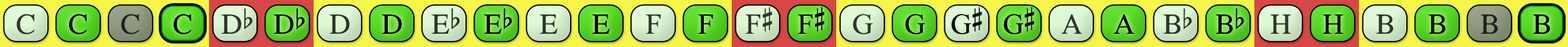
<style>
.page{position:relative;width:1568px;height:47px}
.page>*{position:absolute;margin:0}
.t1{font:29.2px "OpusChords";color:#30362e}
.t2{font:29.2px "OpusChords";color:#000000}
.t3{font:29.2px "OpusChords";color:#1f211b}
.t4{font:29.2px "OpusChords";color:#2f352d}
.t5{font:29.2px "OpusChords";color:#30352d}
.t6{font:29.2px "OpusChords";letter-spacing:-0.025em;color:#000000}
</style>
<div class="page">
<p class="t1" style="left:16px;top:14px;width:19px;height:21px">C</p>
<p class="t2" style="left:69px;top:14px;width:18px;height:21px">C</p>
<p class="t3" style="left:121px;top:14px;width:18px;height:21px">C</p>
<p class="t2" style="left:173px;top:14px;width:18px;height:21px">C</p>
<p class="t4" style="left:221px;top:9px;width:32px;height:25px">Db</p>
<p class="t2" style="left:273px;top:9px;width:32px;height:25px">Db</p>
<p class="t4" style="left:329px;top:15px;width:20px;height:19px">D</p>
<p class="t2" style="left:382px;top:15px;width:20px;height:19px">D</p>
<p class="t5" style="left:432px;top:9px;width:28px;height:25px">Eb</p>
<p class="t2" style="left:484px;top:9px;width:28px;height:25px">Eb</p>
<p class="t1" style="left:540px;top:15px;width:17px;height:19px">E</p>
<p class="t2" style="left:592px;top:15px;width:18px;height:19px">E</p>
<p class="t1" style="left:645px;top:15px;width:16px;height:19px">F</p>
<p class="t2" style="left:698px;top:15px;width:15px;height:19px">F</p>
<p class="t5" style="left:745px;top:7px;width:27px;height:27px">F#</p>
<p class="t2" style="left:797px;top:7px;width:28px;height:27px">F#</p>
<p class="t4" style="left:853px;top:14px;width:20px;height:21px">G</p>
<p class="t2" style="left:905px;top:14px;width:20px;height:21px">G</p>
<p class="t6" style="left:951px;top:7px;width:31px;height:28px">G#</p>
<p class="t6" style="left:1003px;top:7px;width:31px;height:28px">G#</p>
<p class="t4" style="left:1061px;top:14px;width:21px;height:20px">A</p>
<p class="t2" style="left:1113px;top:14px;width:21px;height:20px">A</p>
<p class="t5" style="left:1163px;top:9px;width:29px;height:25px">Bb</p>
<p class="t2" style="left:1216px;top:9px;width:28px;height:25px">Bb</p>
<p class="t5" style="left:1270px;top:15px;width:21px;height:19px">H</p>
<p class="t2" style="left:1322px;top:15px;width:21px;height:19px">H</p>
<p class="t5" style="left:1376px;top:15px;width:18px;height:19px">B</p>
<p class="t2" style="left:1428px;top:15px;width:18px;height:19px">B</p>
<p class="t3" style="left:1480px;top:15px;width:18px;height:19px">B</p>
<p class="t2" style="left:1533px;top:15px;width:17px;height:19px">B</p>
</div>
